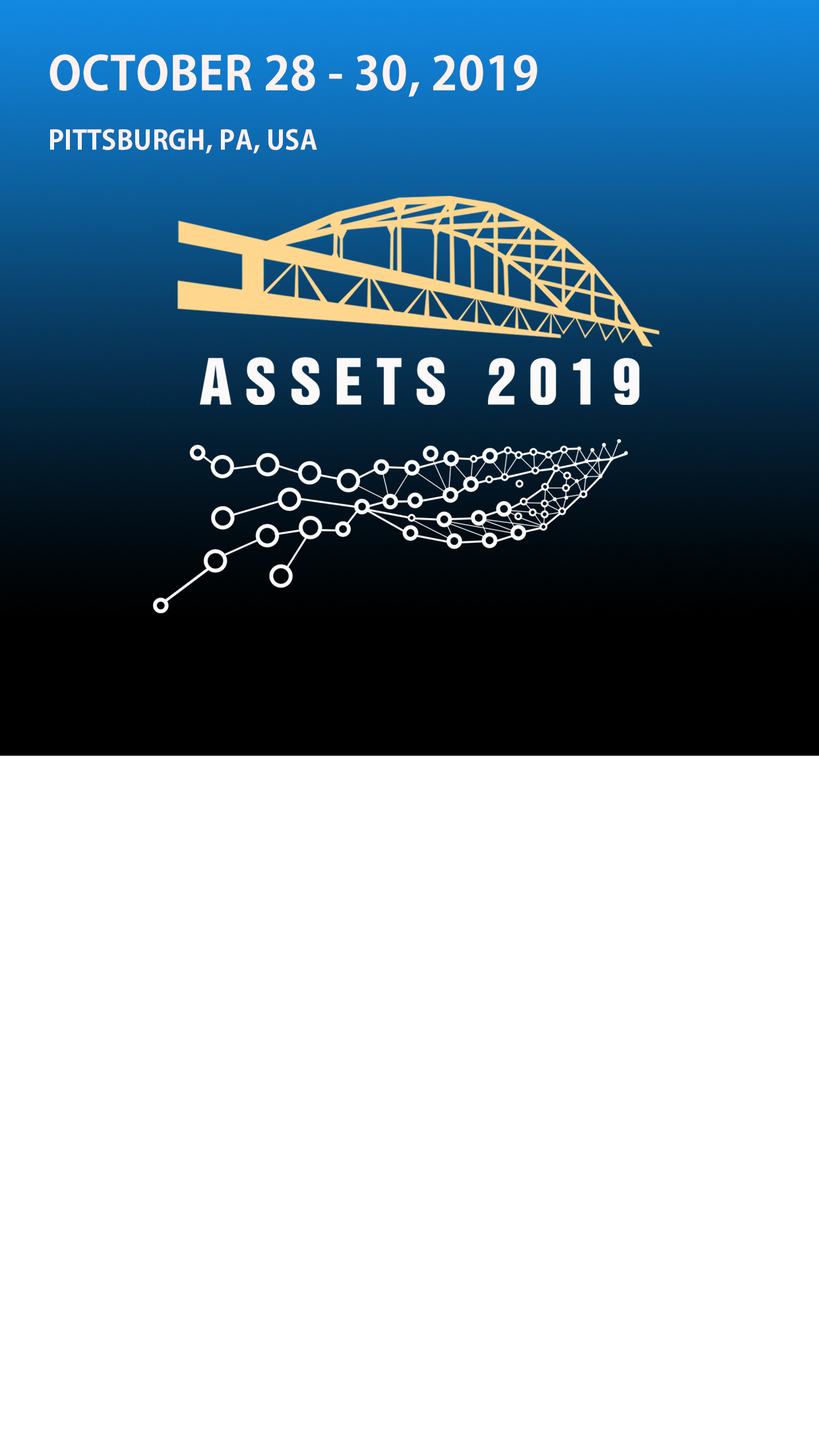
<style>
.page{position:relative;width:819px;height:1456px;background:#ffffff}
.page>*{position:absolute;margin:0}
.t1{font:46.2px/29.7px "KozGoPr6N-Bold";letter-spacing:0.01em;color:#fff1f0;text-transform:uppercase}
.t2{font:26.4px/29.7px "KozGoPr6N-Bold";letter-spacing:0.01em;color:#fff1f0;text-transform:uppercase}
</style>
<div class="page">
<p class="t1" style="left:49px;top:54px;width:488px;height:100px">October 28 - 30, 2019<br><br><span class="t2">Pittsburgh, PA, USA</span></p>
</div>
